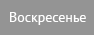
<style>
.page{position:relative;width:94px;height:35px;background:#949494}
.page>*{position:absolute;margin:0}
.t1{font:14px "PTSans-Regular";color:#ffffff}
.t2{font:14px "PTSans-Regular"}
</style>
<div class="page">
<p class="t1" style="left:10px;top:12px;width:76px;height:13px">Воскресенье</p>
<p class="t2" style="left:23px;top:11px;width:49px;height:14px">Суббота</p>
<p class="t1" style="left:30px;top:12px;width:37px;height:13px">Среда</p>
</div>
